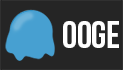
<style>
.page{position:relative;width:123px;height:70px;background:#252525}
.page>*{position:absolute;margin:0}
.t1{font:37.5px "BebasNeue";color:#ffffff}
</style>
<div class="page">
<p class="t1" style="left:63px;top:21px;width:56px;height:27px">Ooge</p>
</div>
